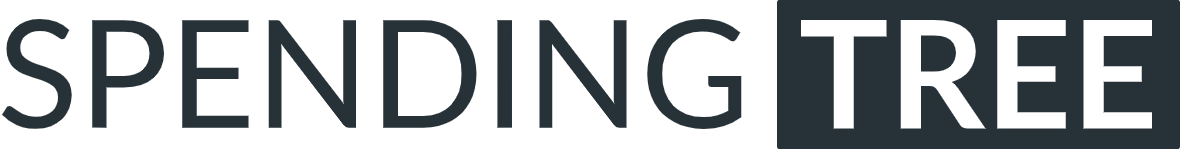
<style>
.page{position:relative;width:1180px;height:149px;background:#ffffff}
.page>*{position:absolute;margin:0}
.t1{font:150px "Lato-Regular";color:#263238}
.t2{font:150px "Lato-Bold";color:#ffffff}
</style>
<div class="page">
<p class="t1" style="left:1px;top:18px;width:741px;height:111px">SPENDING</p>
<p class="t2" style="left:800px;top:19px;width:352px;height:110px">TREE</p>
</div>
